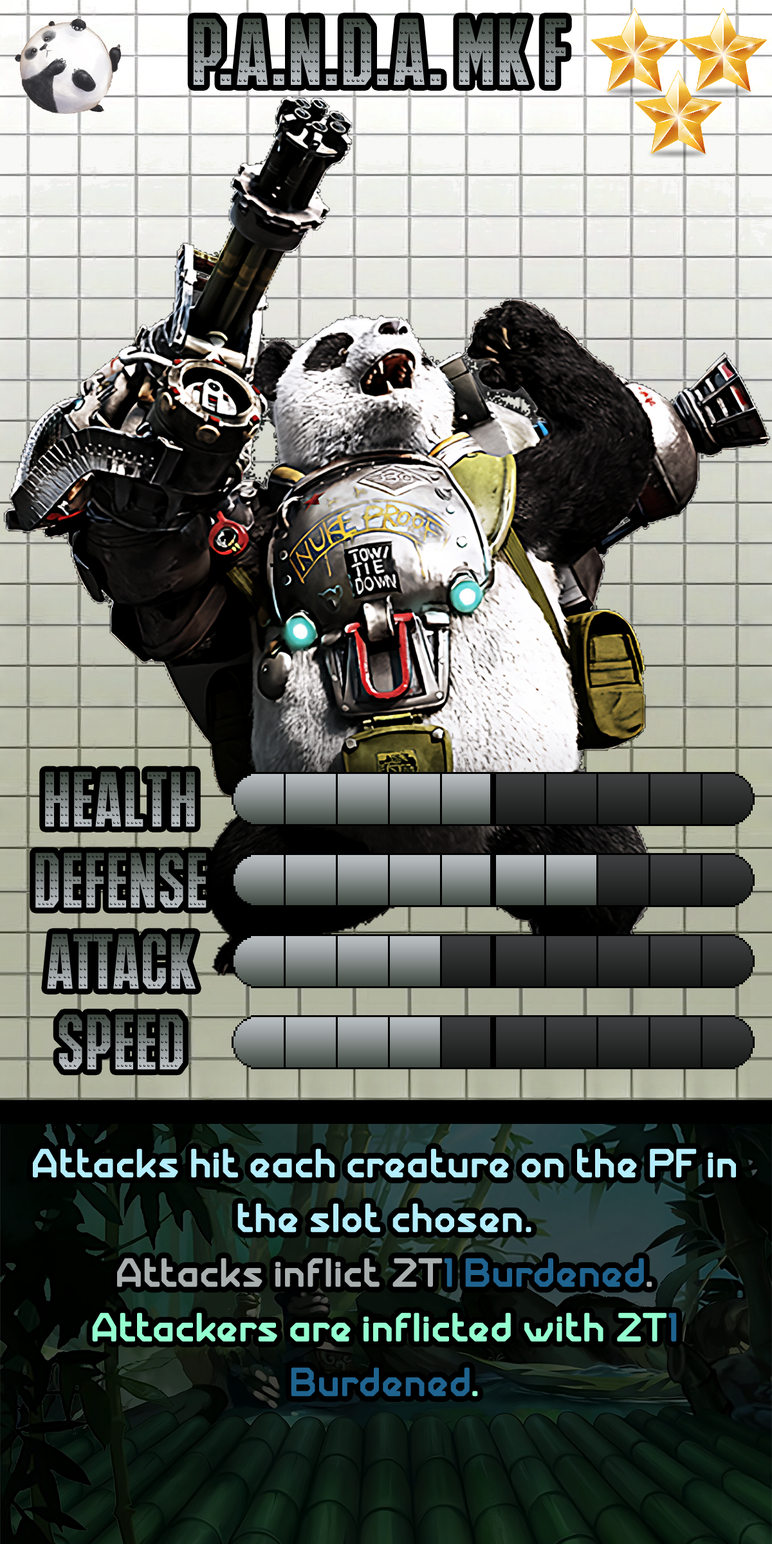
<style>
.page{position:relative;width:772px;height:1544px}
.page>*{position:absolute;margin:0}
.t1{font:128.7px "IRONMANOFWAR001BNCV"}
.t2{font:66.3px/54.7px "GiantRobotArmy-Medium";color:#b4edfc}
.t3{font:66.3px/54.7px "GiantRobotArmy-Medium";color:#a9aeaf}
.t4{font:66.3px/54.7px "GiantRobotArmy-Medium";color:#1f638f}
.t5{font:66.3px/54.7px "GiantRobotArmy-Medium";color:#94ffd0}
</style>
<div class="page">
<p class="t1" style="left:45px;top:772px;width:150px;height:55px">Health</p>
<p class="t1" style="left:35px;top:853px;width:172px;height:55px">Defense</p>
<p class="t1" style="left:47px;top:934px;width:149px;height:55px">Attack</p>
<p class="t1" style="left:59px;top:1015px;width:124px;height:55px">Speed</p>
<p class="t2" style="left:33px;top:1149px;width:703px;height:248px;text-align:center">Attacks hit each creature on the PF in the slot chosen.<br><span class="t3">Attacks inflict 2T</span><span class="t4">1 Burdened</span><span class="t3">.<br></span><span class="t5">Attackers are inflicted with 2T</span><span class="t4">1 Burdened</span><span class="t5">.</span></p>
</div>
